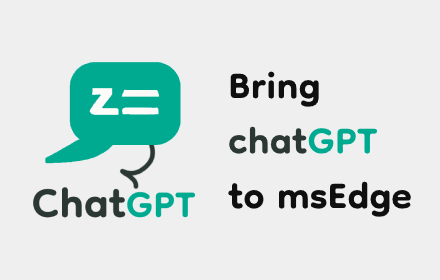
<style>
.page{position:relative;width:440px;height:280px;background:#efefef}
.page>*{position:absolute;margin:0}
.t1{font:60px/55px "Dongle-Bold";color:#0f0f0f}
.t2{font:60px/55px "Dongle-Bold";color:#2a3732}
.t3{font:60px/55px "Dongle-Bold";color:#00aa91}
</style>
<div class="page">
<p class="t1" style="left:228px;top:71px;width:183px;height:146px">Bring <br><span class="t2">chat</span><span class="t3">GPT <br></span>to msEdge</p>
</div>
